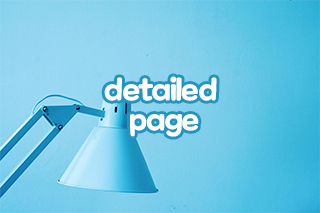
<style>
.page{position:relative;width:320px;height:213px}
.page>*{position:absolute;margin:0}
.t1{font:30px/30px "MaplestoryBold";letter-spacing:-0.025em;color:#ffffff}
</style>
<div class="page">
<p class="t1" style="left:104px;top:76px;width:113px;height:61px;text-align:center">detailed <br>page</p>
</div>
